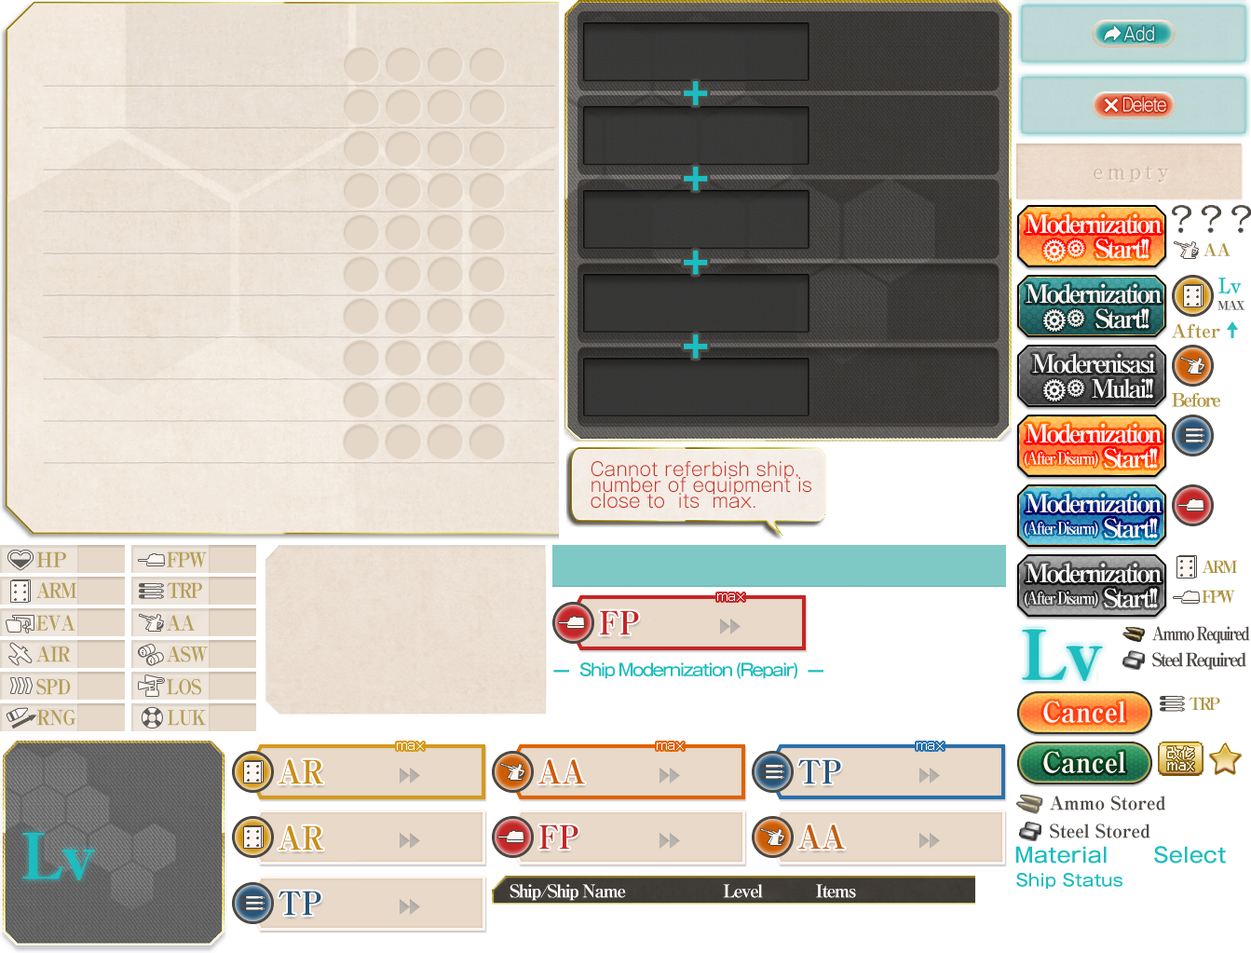
<style>
.page{position:relative;width:1251px;height:953px}
.page>*{position:absolute;margin:0}
.t1{font:17.7px "GothicMB101Pro-Light";color:#fff5ef;scale:0.88 1}
.t2{font:17.7px "GothicMB101Pro-Light";letter-spacing:-0.08em;color:#fff5ef;scale:0.88 1}
.t3{font:25.2px "RyuminPro-ExBold";letter-spacing:-0.12em;color:#fff6f2}
.t4{font:16.8px "RyuminPro-ExBold";color:#af9341}
.t5{font:12.1px "RyuminPro-ExBold";letter-spacing:-0.12em;color:#595650}
.t6{font:18.6px "RyuminPro-ExBold";color:#af9441}
.t7{font:18.6px "RyuminPro-ExBold";letter-spacing:-0.12em;color:#af9441}
.t8{font:18.6px/15.8px "GothicMB101Pro-Light";color:#cb3428}
.t9{font:16.8px "RyuminPro-ExBold";letter-spacing:-0.12em;color:#fff6f2;scale:0.8 1}
.t10{font:16.8px "RyuminPro-ExBold";letter-spacing:-0.18em;color:#af9341}
.t11{font:32.6px "RyuminPro-ExBold";color:#c42626;scale:0.9 1}
.t12{font:18.6px "RyuminPro-ExBold";letter-spacing:-0.12em;color:#4d4944;scale:0.83 1}
.t13{font:18.6px "RyuminPro-ExBold";letter-spacing:-0.12em;color:#4d4944;scale:0.95 1}
.t14{font:27.9px "RyuminPro-ExBold";color:#fff6f2;scale:0.95 1}
.t15{font:32.6px "RyuminPro-ExBold";color:#cb8e15;scale:0.9 1}
.t16{font:32.6px "RyuminPro-ExBold";color:#c05b0a;scale:0.9 1}
.t17{font:32.6px "RyuminPro-ExBold";color:#29557a;scale:0.9 1}
.t18{font:18.6px "RyuminPro-ExBold";color:#4d4944;scale:0.95 1}
.t19{font:32.6px "RyuminPro-ExBold";color:#c45e0c;scale:0.9 1}
.t20{font:20.5px "GothicMB101Pro-Medium";color:#1dbcbf}
.t21{font:16.8px "GothicMB101Pro-Medium";color:#1ebdc0}
.t22{font:17.7px "RyuminPro-ExBold";letter-spacing:-0.08em;color:#ffffff}
</style>
<div class="page">
<p class="t1" style="left:1124px;top:26px;width:30px;height:15px">Add</p>
<p class="t2" style="left:1124px;top:97px;width:42px;height:15px">Delete</p>
<p class="t3" style="left:1026px;top:213px;width:136px;height:21px">Modernization</p>
<p class="t3" style="left:1096px;top:238px;width:54px;height:21px">Start!!</p>
<p class="t4" style="left:1204px;top:243px;width:27px;height:13px">AA</p>
<p class="t3" style="left:1026px;top:283px;width:136px;height:21px">Modernization</p>
<p class="t5" style="left:1218px;top:300px;width:28px;height:10px">MAX</p>
<p class="t3" style="left:1096px;top:308px;width:54px;height:21px">Start!!</p>
<p class="t6" style="left:1172px;top:323px;width:48px;height:15px">After</p>
<p class="t7" style="left:1172px;top:392px;width:48px;height:15px">Before</p>
<p class="t3" style="left:1026px;top:423px;width:136px;height:20px">Modernization</p>
<p class="t3" style="left:1104px;top:448px;width:54px;height:21px">Start!!</p>
<p class="t8" style="left:591px;top:461px;width:220px;height:48px">Cannot referbish ship,<br>number of equipment is <br>close to  its  max.</p>
<p class="t9" style="left:1025px;top:452px;width:73px;height:16px">(After Disarm)</p>
<p class="t3" style="left:1026px;top:493px;width:136px;height:20px">Modernization</p>
<p class="t9" style="left:1025px;top:522px;width:73px;height:16px">(After Disarm)</p>
<p class="t3" style="left:1104px;top:518px;width:54px;height:20px">Start!!</p>
<p class="t10" style="left:1202px;top:560px;width:35px;height:13px">ARM</p>
<p class="t10" style="left:1202px;top:590px;width:33px;height:14px">FPW</p>
<p class="t11" style="left:600px;top:610px;width:39px;height:25px">FP</p>
<p class="t12" style="left:1152px;top:626px;width:98px;height:18px">Ammo Required</p>
<p class="t13" style="left:1152px;top:652px;width:95px;height:18px">Steel Required</p>
<p class="t14" style="left:1043px;top:701px;width:82px;height:22px">Cancel</p>
<p class="t10" style="left:1189px;top:697px;width:31px;height:13px">TRP</p>
<p class="t15" style="left:279px;top:759px;width:44px;height:25px">AR</p>
<p class="t16" style="left:538px;top:759px;width:47px;height:25px">AA</p>
<p class="t17" style="left:798px;top:759px;width:43px;height:25px">TP</p>
<p class="t14" style="left:1043px;top:751px;width:82px;height:22px">Cancel</p>
<p class="t18" style="left:1050px;top:796px;width:115px;height:15px">Ammo Stored</p>
<p class="t15" style="left:279px;top:825px;width:44px;height:26px">AR</p>
<p class="t11" style="left:539px;top:824px;width:40px;height:26px">FP</p>
<p class="t19" style="left:798px;top:824px;width:47px;height:26px">AA</p>
<p class="t18" style="left:1050px;top:824px;width:101px;height:14px">Steel Stored</p>
<p class="t20" style="left:1015px;top:846px;width:92px;height:18px">Material</p>
<p class="t20" style="left:1154px;top:846px;width:72px;height:18px">Select</p>
<p class="t21" style="left:1016px;top:873px;width:107px;height:16px">Ship Status</p>
<p class="t17" style="left:279px;top:891px;width:42px;height:25px">TP</p>
<p class="t22" style="left:510px;top:884px;width:346px;height:17px">Ship/Ship Name                      Level            Items</p>
</div>
